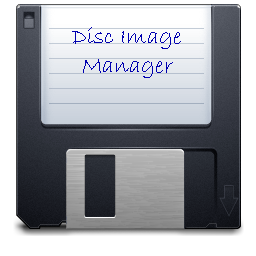
<style>
.page{position:relative;width:256px;height:256px;background:#ffffff}
.page>*{position:absolute;margin:0}
.t1{font:24px "BradleyHandITC";color:#0000b0}
</style>
<div class="page">
<p class="t1" style="left:72px;top:27px;width:109px;height:51px;text-align:center">Disc Image<br>Manager</p>
</div>
